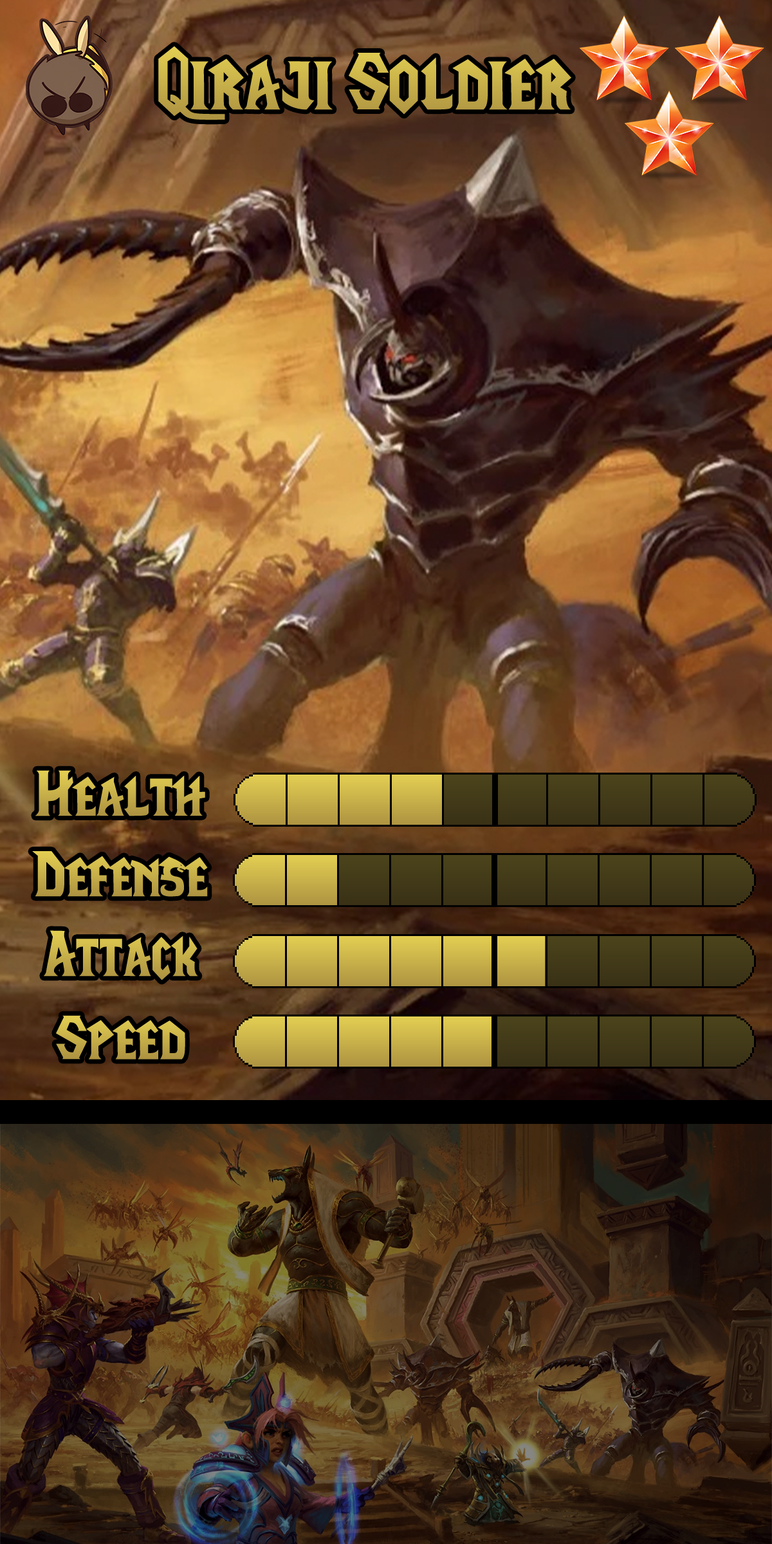
<style>
.page{position:relative;width:772px;height:1544px}
.page>*{position:absolute;margin:0}
.t1{font:83.6px "LifeCraft";color:#c5ae49}
.t2{font:64.3px "LifeCraft";color:#c4ac48}
.t3{font:64.3px "LifeCraft";color:#c6ae49}
</style>
<div class="page">
<p class="t1" style="left:158px;top:46px;width:413px;height:74px">Qiraji Soldier</p>
<p class="t2" style="left:35px;top:770px;width:170px;height:47px">Health</p>
<p class="t2" style="left:32px;top:851px;width:176px;height:46px">Defense</p>
<p class="t3" style="left:44px;top:930px;width:154px;height:51px">Attack</p>
<p class="t3" style="left:56px;top:1015px;width:129px;height:45px">Speed</p>
</div>
